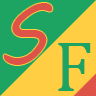
<style>
.page{position:relative;width:96px;height:96px;background:#1da362}
.page>*{position:absolute;margin:0}
.t1{font:80px "MVBoli";color:#de5347}
.t2{font:72px "CambriaMath";color:#1da362}
</style>
<div class="page">
<p class="t1" style="left:3px;top:3px;width:50px;height:62px">S</p>
<p class="t2" style="left:58px;top:43px;width:33px;height:48px">F</p>
</div>
